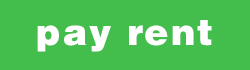
<style>
.page{position:relative;width:250px;height:70px;background:#43be4c}
.page>*{position:absolute;margin:0}
.t1{font:27.4px "HelveticaLTStd-Blk";letter-spacing:0.05em;color:#ffffff}
</style>
<div class="page">
<p class="t1" style="left:37px;top:20px;width:175px;height:32px">pay rent</p>
</div>
